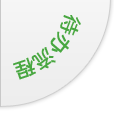
<style>
.page{position:relative;width:114px;height:114px;background:#ffffff}
.page>*{position:absolute;margin:0}
.t1{font:19.3px "MicrosoftYaHei";color:#49a741;font-weight:bold}
</style>
<div class="page">
<p class="t1" style="left:13px;top:15px;width:68px;height:65px;rotate:90deg">待办流程</p>
</div>
